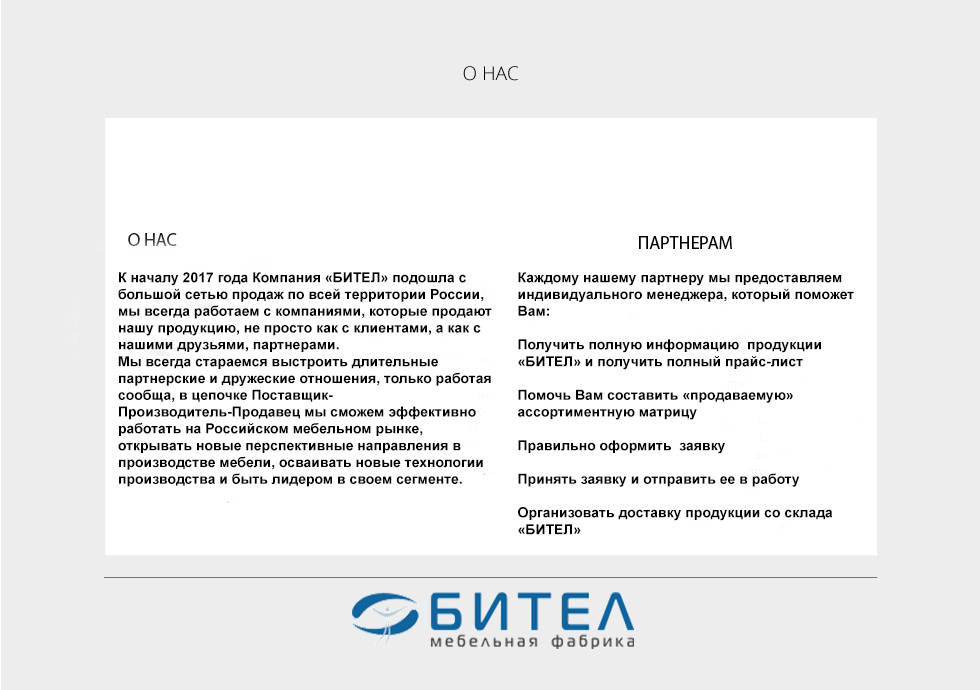
<style>
.page{position:relative;width:980px;height:690px;background:#ededed}
.page>*{position:absolute;margin:0}
.t1{font:14px "Arial-BoldMT";color:#000000}
</style>
<div class="page">
<p class="t1" style="left:118px;top:272px;width:374px;height:215px">К началу 2017 года Компания «БИТЕЛ» подошла с большой сетью продаж по всей территории России, мы всегда работаем с компаниями, которые продают нашу продукцию, не просто как с клиентами, а как с нашими друзьями, партнерами. <br>Мы всегда стараемся выстроить длительные партнерские и дружеские отношения, только работая сообща, в цепочке Поставщик- Производитель-Продавец мы сможем эффективно работать на Российском мебельном рынке, открывать новые перспективные направления в производстве мебели, осваивать новые технологии производства и быть лидером в своем сегменте.</p>
<p class="t1" style="left:518px;top:272px;width:336px;height:263px">Каждому нашему партнеру мы предоставляем индивидуального менеджера, который поможет Вам:<br><br>Получить полную информацию  продукции «БИТЕЛ» и получить полный прайс-лист<br><br>Помочь Вам составить «продаваемую» ассортиментную матрицу<br><br>Правильно оформить  заявку<br><br>Принять заявку и отправить ее в работу<br><br>Организовать доставку продукции со склада «БИТЕЛ»<br><br>Информировать на какой стадии находится ваш заказ<br><br>Оформить товарно-сопроводительную документацию и передать её</p>
</div>
